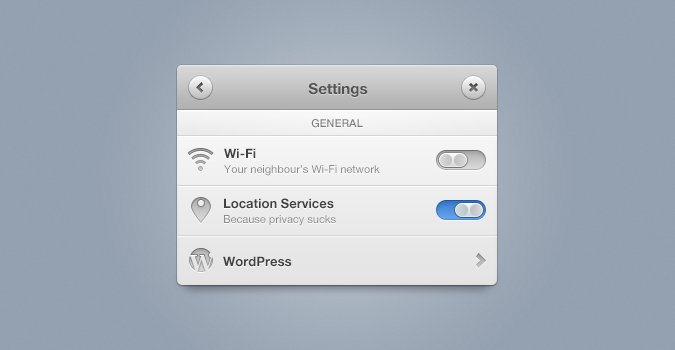
<style>
.page{position:relative;width:675px;height:350px}
.page>*{position:absolute;margin:0}
.t1{font:15px "HelveticaNeue-Bold";color:#535252}
.t2{font:11px "HelveticaNeueLTPro-Md";color:#7d7d7d;text-transform:uppercase}
.t3{font:13px "HelveticaNeue-Bold";color:#424242}
.t4{font:11px "HelveticaNeue";color:#8a8a8a}
</style>
<div class="page">
<p class="t1" style="left:308px;top:83px;width:60px;height:14px">Settings</p>
<p class="t2" style="left:311px;top:119px;width:52px;height:9px">general</p>
<p class="t3" style="left:224px;top:148px;width:32px;height:10px">Wi-Fi</p>
<p class="t4" style="left:224px;top:165px;width:156px;height:11px">Your neighbour’s Wi-Fi network</p>
<p class="t3" style="left:224px;top:198px;width:110px;height:11px">Location Services</p>
<p class="t4" style="left:224px;top:215px;width:112px;height:11px">Because privacy sucks</p>
<p class="t3" style="left:223px;top:256px;width:69px;height:11px">WordPress</p>
</div>
